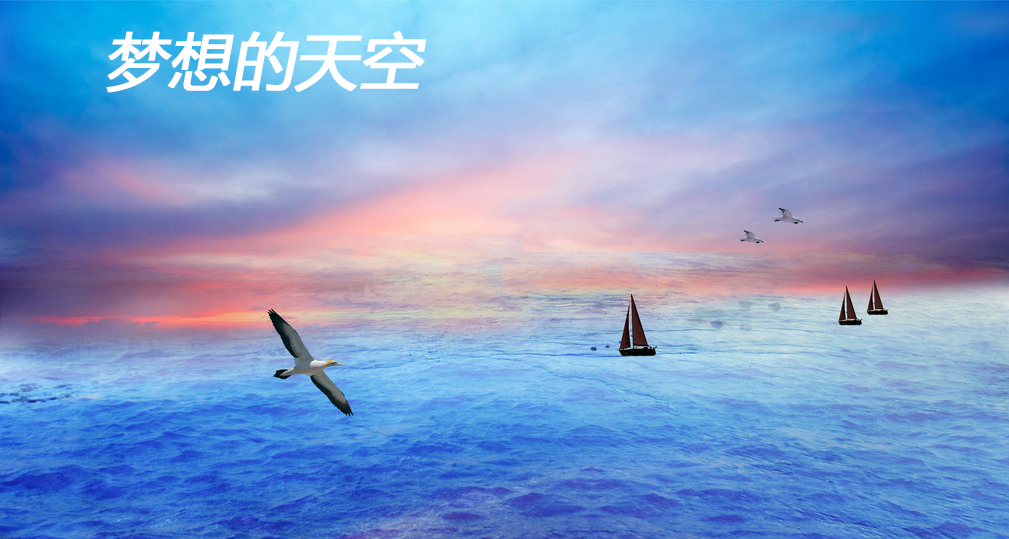
<style>
.page{position:relative;width:1009px;height:539px}
.page>*{position:absolute;margin:0}
.t1{font:62px "MicrosoftYaHei";color:#ffffff;font-weight:bold;font-style:italic}
</style>
<div class="page">
<p class="t1" style="left:106px;top:31px;width:321px;height:62px">梦想的天空</p>
</div>
